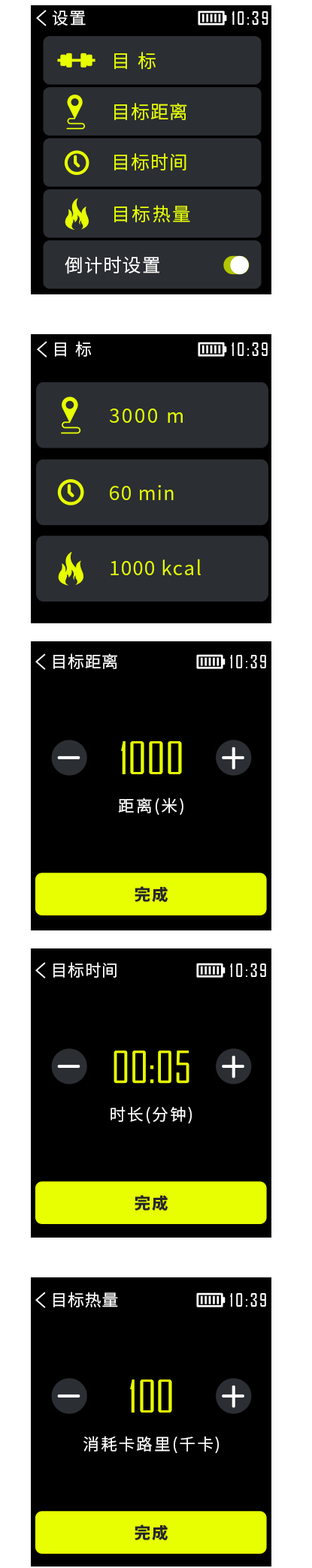
<style>
.page{position:relative;width:312px;height:1568px;background:#000000}
.page>*{position:absolute;margin:0}
.t1{font:16.3px "NotoSansHans-DemiLight";letter-spacing:0.1em;color:#ffffff}
.t2{font:18.3px "AgencyFB-Reg";letter-spacing:0.1em;color:#ffffff}
.t3{font:18.3px "NotoSansHans-DemiLight";letter-spacing:0.1em;color:#e7ff00}
.t4{font:18.3px "NotoSansHans-DemiLight";letter-spacing:0.05em;color:#e7ff00}
.t5{font:18.3px "NotoSansHans-DemiLight";letter-spacing:0.05em;color:#ffffff}
.t6{font:16.2px "NotoSansHans-DemiLight";letter-spacing:0.1em;color:#ffffff}
.t7{font:19.5px "NotoSansHans-DemiLight";letter-spacing:0.1em;color:#e7ff00}
.t8{font:19.5px "NotoSansHans-DemiLight";letter-spacing:0.05em;color:#e7ff00}
.t9{font:16.2px "NotoSansHans-DemiLight";letter-spacing:0.05em;color:#ffffff}
.t10{font:42.6px "AgencyFB-Reg";color:#e7ff00}
.t11{font:16.2px "NotoSansHans-Black";letter-spacing:0.1em;color:#282828}
</style>
<div class="page">
<p class="t1" style="left:52px;top:11px;width:34px;height:15px">设置</p>
<p class="t2" style="left:231px;top:11px;width:37px;height:14px">10:39</p>
<p class="t3" style="left:114px;top:52px;width:41px;height:17px">目 标</p>
<p class="t4" style="left:114px;top:103px;width:73px;height:17px">目标距离</p>
<p class="t4" style="left:114px;top:153px;width:72px;height:18px">目标时间</p>
<p class="t3" style="left:114px;top:205px;width:76px;height:17px">目标热量</p>
<p class="t5" style="left:65px;top:256px;width:94px;height:18px">倒计时设置</p>
<p class="t6" style="left:55px;top:341px;width:36px;height:16px">目 标</p>
<p class="t2" style="left:231px;top:342px;width:36px;height:14px">10:39</p>
<p class="t7" style="left:110px;top:409px;width:72px;height:14px">3000 m</p>
<p class="t8" style="left:110px;top:485px;width:63px;height:15px">60 min</p>
<p class="t8" style="left:110px;top:559px;width:91px;height:16px">1000 kcal</p>
<p class="t9" style="left:53px;top:653px;width:64px;height:16px">目标距离</p>
<p class="t2" style="left:230px;top:655px;width:36px;height:13px">10:39</p>
<p class="t10" style="left:121px;top:741px;width:61px;height:33px">1000</p>
<p class="t6" style="left:118px;top:798px;width:65px;height:17px">距离(米)</p>
<p class="t11" style="left:134px;top:886px;width:33px;height:17px">完成</p>
<p class="t9" style="left:53px;top:962px;width:63px;height:16px">目标时间</p>
<p class="t2" style="left:230px;top:963px;width:36px;height:14px">10:39</p>
<p class="t6" style="left:110px;top:1106px;width:81px;height:17px">时长(分钟)</p>
<p class="t11" style="left:134px;top:1195px;width:33px;height:16px">完成</p>
<p class="t9" style="left:53px;top:1292px;width:65px;height:15px">目标热量</p>
<p class="t2" style="left:230px;top:1293px;width:36px;height:14px">10:39</p>
<p class="t10" style="left:130px;top:1380px;width:42px;height:33px">100</p>
<p class="t6" style="left:83px;top:1436px;width:136px;height:17px">消耗卡路里(千卡)</p>
<p class="t11" style="left:134px;top:1524px;width:33px;height:17px">完成</p>
</div>
